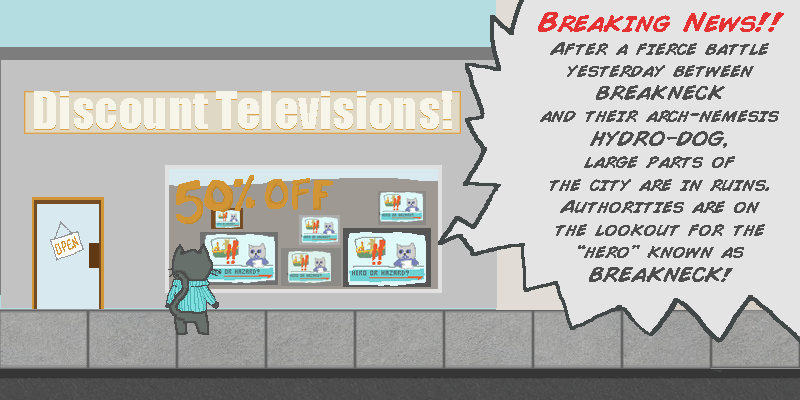
<style>
.page{position:relative;width:800px;height:400px;background:#e4e4e4}
.page>*{position:absolute;margin:0}
.t1{font:18.7px "ComicBook-BoldItalic";color:#4d4e4d}
.t2{font:26.7px "ComicBook-BoldItalic";color:#e63232}
.t3{font:20px "ComicBook-BoldItalic";color:#4d4e4d}
.t4{font:48px "Impact";color:#f7f4e9}
</style>
<div class="page">
<p class="t1" style="left:538px;top:12px;width:246px;height:270px;text-align:center"><span class="t2">Breaking News!!<br></span>After a fierce battle<br>yesterday between<br>BREAKNECK <br>and their arch-nemesis<br><span class="t3">HYDRO-DOG,<br></span>large parts of<br>the city are in ruins.<br>Authorities are on<br>the lookout for the<br>“hero” known as<br><span class="t3">BREAKNECK!</span></p>
<p class="t4" style="left:34px;top:92px;width:418px;height:38px">Discount Televisions!</p>
<p class="t4" style="left:34px;top:91px;width:418px;height:38px">Discount Televisions!</p>
</div>
